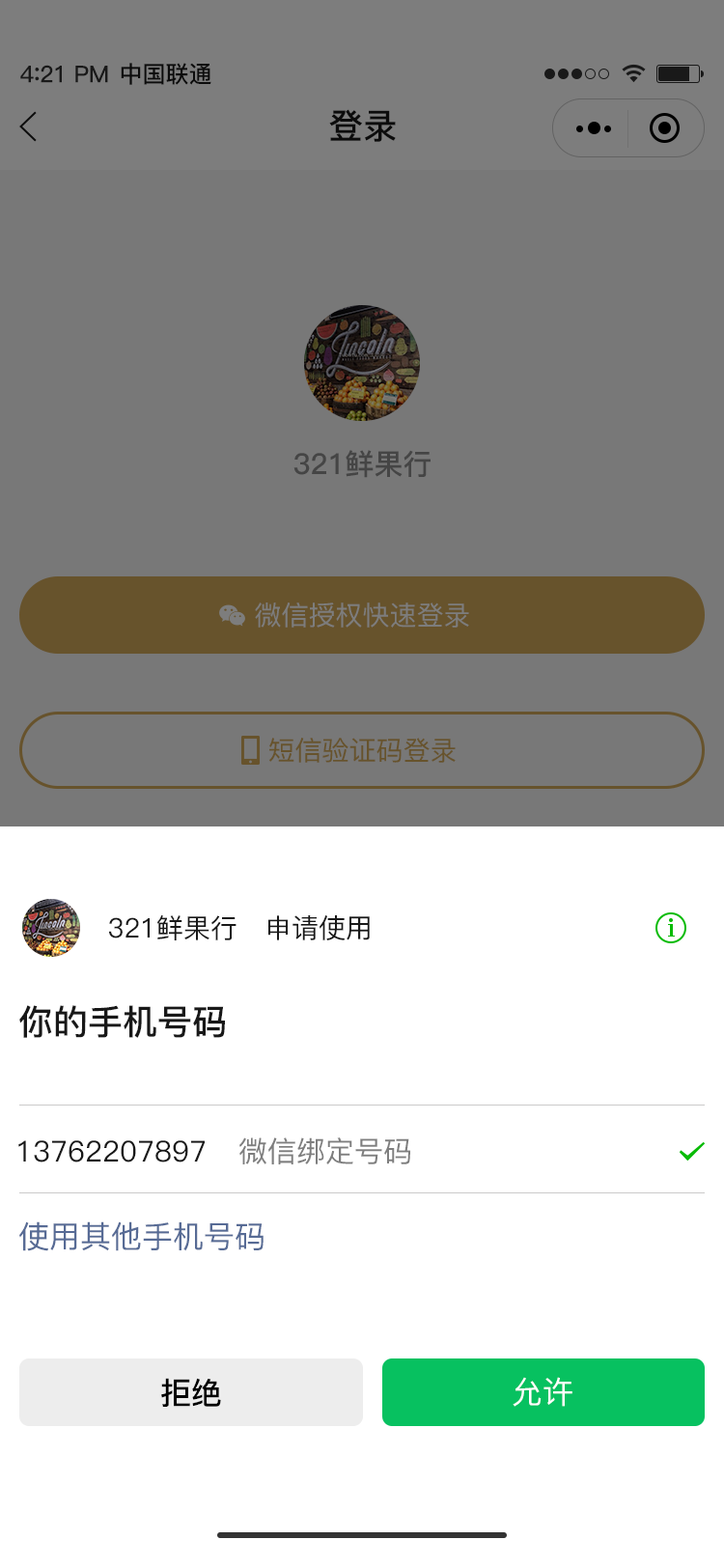
<style>
.page{position:relative;width:724px;height:1568px;background:#ffffff}
.page>*{position:absolute;margin:0}
.t1{font:23.2px "PingFang-SC-Bold";letter-spacing:-0.02em;color:#191919}
.t2{font:25.1px "PingFang-SC-Bold";letter-spacing:-0.02em;color:#191919}
.t3{font:23.2px "PingFang-SC-Bold";color:#181818}
.t4{font:34.8px "PingFang-SC-Bold";color:#181818}
.t5{font:29px "PingFang-SC-Bold";color:#454545}
.t6{font:27px "PingFang-SC-Medium";color:#7d7d7d}
.t7{font:27px "PingFang-SC-Medium";color:#67532c}
.t8{font:27px "PingFang-SC-Medium";color:#181818}
.t9{font:29px "PingFang-SC-Medium";color:#181818}
.t10{font:29px "PingFang-SC-Medium";color:#7e7e7e}
.t11{font:30.9px "PingFang-SC-Medium";color:#576b95}
.t12{font:30.9px "PingFang-SC-Bold";color:#000000}
.t13{font:30.9px "PingFang-SC-Medium";color:#ffffff}
</style>
<div class="page">
<p class="t1" style="left:20px;top:65px;width:88px;height:18px">4<span class="t2">:</span>21 PM</p>
<p class="t3" style="left:121px;top:63px;width:90px;height:22px">中国联通</p>
<p class="t4" style="left:329px;top:109px;width:67px;height:33px">登录</p>
<p class="t5" style="left:294px;top:450px;width:137px;height:28px">321鲜果行</p>
<p class="t6" style="left:255px;top:602px;width:214px;height:26px">微信授权快速登录</p>
<p class="t7" style="left:269px;top:738px;width:187px;height:25px">短信验证码登录</p>
<p class="t8" style="left:109px;top:915px;width:128px;height:25px">321鲜果行</p>
<p class="t8" style="left:268px;top:915px;width:102px;height:25px">申请使用</p>
<p class="t4" style="left:19px;top:1005px;width:206px;height:33px">你的手机号码</p>
<p class="t9" style="left:18px;top:1140px;width:187px;height:22px">13762207897</p>
<p class="t10" style="left:239px;top:1137px;width:171px;height:27px">微信绑定号码</p>
<p class="t11" style="left:19px;top:1221px;width:245px;height:30px">使用其他手机号码</p>
<p class="t12" style="left:161px;top:1378px;width:60px;height:29px">拒绝</p>
<p class="t13" style="left:513px;top:1377px;width:60px;height:30px">允许</p>
</div>
